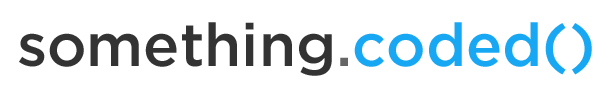
<style>
.page{position:relative;width:615px;height:98px;background:#ffffff}
.page>*{position:absolute;margin:0}
.t1{font:60px "GothamMedium";color:#333333}
.t2{font:60px "GothamMedium";color:#666666}
.t3{font:60px "GothamMedium";color:#18a8f3}
</style>
<div class="page">
<p class="t1" style="left:19px;top:22px;width:573px;height:54px">something<span class="t2">.</span><span class="t3">coded()</span></p>
</div>
